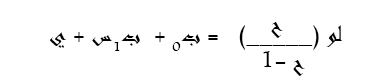
<style>
.page{position:relative;width:376px;height:77px;background:#ffffff}
.page>*{position:absolute;margin:0}
.t1{font:19.4px "Andalus";color:#000000}
.t2{font:19.4px "Andalus";color:#ffffff}
</style>
<div class="page">
<p class="t1" style="left:49px;top:25px;width:293px;height:26px">لو (_____)<span class="t2">ح</span> = ب0 +  ب1س + ي</p>
<p class="t1" style="left:271px;top:22px;width:12px;height:16px">ح</p>
<p class="t1" style="left:263px;top:51px;width:42px;height:25px">1- ح</p>
</div>
